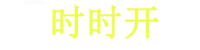
<style>
.page{position:relative;width:200px;height:50px;background:#ffffff}
.page>*{position:absolute;margin:0}
.t1{font:36px "SimSun";color:#eefc4f;font-weight:bold}
</style>
<div class="page">
<p class="t1" style="left:52px;top:5px;width:107px;height:34px">时时开</p>
</div>
